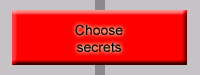
<style>
.page{position:relative;width:200px;height:75px;background:#ff0000}
.page>*{position:absolute;margin:0}
.t1{font:14px "ArialMT";color:#000000}
</style>
<div class="page">
<p class="t1" style="left:75px;top:24px;width:48px;height:28px;text-align:center">Choose<br>secrets</p>
</div>
